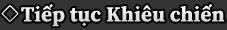
<style>
.page{position:relative;width:227px;height:30px;background:#333333}
.page>*{position:absolute;margin:0}
.t1{font:21px "SourceSerifRoman-Bold";letter-spacing:0.011em;color:#e4e4e4}
</style>
<div class="page">
<p class="t1" style="left:21px;top:4px;width:204px;height:23px">Tiếp tục Khiêu chiến</p>
</div>
